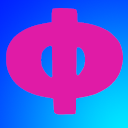
<style>
.page{position:relative;width:128px;height:128px;background:#e01ba6}
.page>*{position:absolute;margin:0}
.t1{font:128px "soft-Bold";color:#e01ba6;scale:1.1 1}
</style>
<div class="page">
<p class="t1" style="left:6px;top:8px;width:117px;height:107px">Ф</p>
</div>
